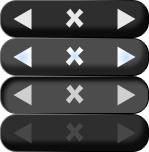
<style>
.page{position:relative;width:149px;height:152px;background:#4c4c4c}
.page>*{position:absolute;margin:0}
.t1{font:24px "LithosPro-Black";color:#e8e8e8}
.t2{font:24px "LithosPro-Black";color:#edf4ff}
.t3{font:24px "LithosPro-Black";color:#cfcfcf}
.t4{font:24px "LithosPro-Black";color:#484848}
</style>
<div class="page">
<p class="t1" style="left:65px;top:8px;width:19px;height:20px">X</p>
<p class="t2" style="left:65px;top:46px;width:19px;height:20px">X</p>
<p class="t3" style="left:65px;top:84px;width:19px;height:20px">X</p>
<p class="t4" style="left:65px;top:122px;width:19px;height:20px">X</p>
</div>
